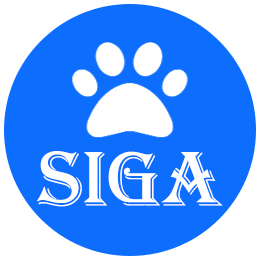
<style>
.page{position:relative;width:260px;height:260px;background:#0d6efd}
.page>*{position:absolute;margin:0}
.t1{font:80px "Algerian";color:#ffffff}
</style>
<div class="page">
<p class="t1" style="left:37px;top:151px;width:186px;height:56px">SIGA</p>
</div>
